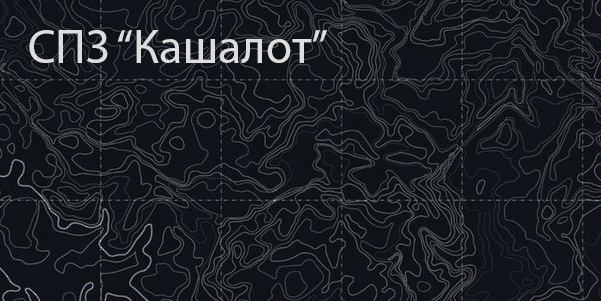
<style>
.page{position:relative;width:601px;height:301px}
.page>*{position:absolute;margin:0}
.t1{font:48px "MyriadPro-Regular";color:#dedede}
</style>
<div class="page">
<p class="t1" style="left:29px;top:30px;width:298px;height:33px">СПЗ “Кашалот”</p>
</div>
